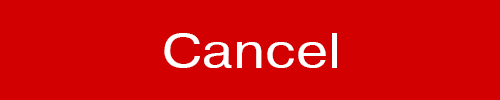
<style>
.page{position:relative;width:500px;height:100px;background:#d20000}
.page>*{position:absolute;margin:0}
.t1{font:48px "Helvetica";color:#ffffff;scale:1.2 1}
</style>
<div class="page">
<p class="t1" style="left:164px;top:33px;width:173px;height:35px">Cancel</p>
</div>
